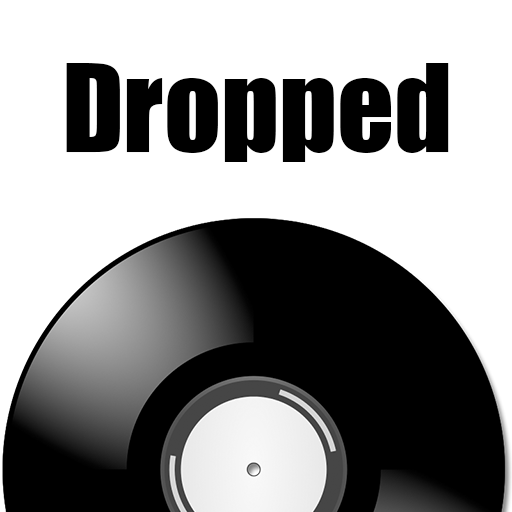
<style>
.page{position:relative;width:512px;height:512px;background:#ffffff}
.page>*{position:absolute;margin:0}
.t1{font:112px "Impact";color:#000000}
</style>
<div class="page">
<p class="t1" style="left:66px;top:63px;width:383px;height:99px">Dropped</p>
</div>
